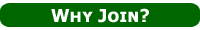
<style>
.page{position:relative;width:200px;height:30px;background:#006600}
.page>*{position:absolute;margin:0}
.t1{font:17.9px "TahomaSmallCap-Bold";color:#ffffff}
</style>
<div class="page">
<p class="t1" style="left:51px;top:8px;width:98px;height:15px">Why Join?</p>
</div>
